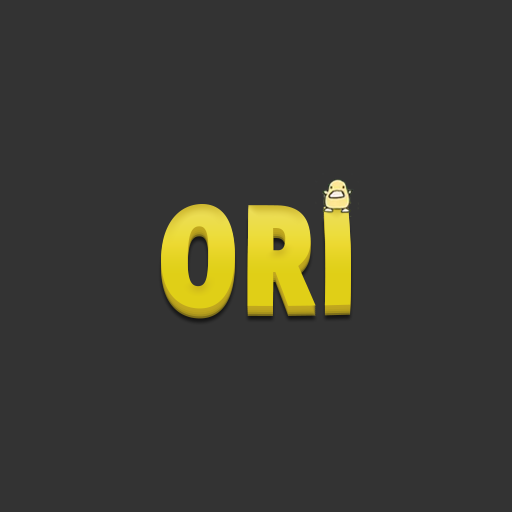
<style>
.page{position:relative;width:512px;height:512px;background:#333333}
.page>*{position:absolute;margin:0}
.t1{font:135.4px "FiraSans-Ultra";letter-spacing:0.075em;text-transform:uppercase;scale:0.77 1}
</style>
<div class="page">
<p class="t1" style="left:161px;top:204px;width:190px;height:105px">Ori</p>
</div>
